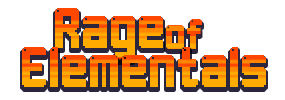
<style>
.page{position:relative;width:285px;height:100px;background:#ffffff}
.page>*{position:absolute;margin:0}
.t1{font:40px "LightPixel-7"}
.t2{font:30px "LightPixel-7"}
</style>
<div class="page">
<p class="t1" style="left:55px;top:8px;width:108px;height:52px">Rage</p>
<p class="t2" style="left:166px;top:19px;width:36px;height:30px">of</p>
<p class="t1" style="left:22px;top:47px;width:244px;height:40px">Elementals</p>
</div>
